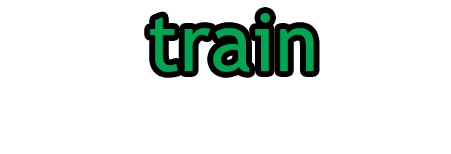
<style>
.page{position:relative;width:451px;height:154px;background:#ffffff}
.page>*{position:absolute;margin:0}
.t1{font:80px "TrebuchetMS";color:#00a651}
</style>
<div class="page">
<p class="t1" style="left:150px;top:13px;width:164px;height:59px">train</p>
</div>
